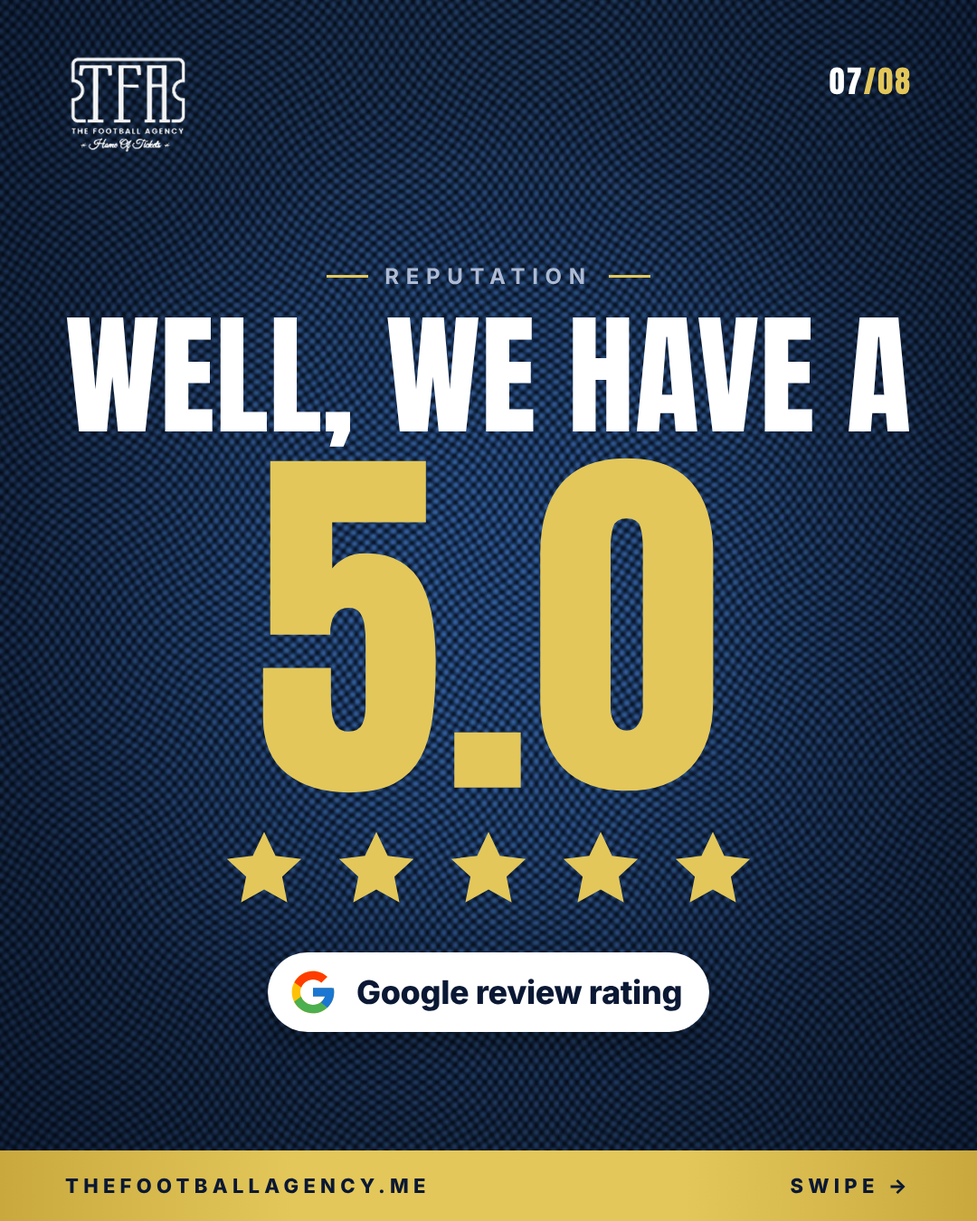
<style>
.page{position:relative;width:977px;height:1221px}
.page>*{position:absolute;margin:0}
.t1{font:30.7px "Anton-Regular";letter-spacing:0.06em;color:#e3c75a}
.t2{font:30.7px "Anton-Regular";letter-spacing:0.06em;color:#ffffff}
.t3{font:21.7px "Inter-Bold";letter-spacing:0.32em;color:#aebbd3}
.t4{font:132.6px "Anton-Regular";letter-spacing:0.005em;color:#ffffff}
.t5{font:379.8px "Anton-Regular";letter-spacing:0.005em;color:#e3c75a}
.t6{font:32.6px "Inter-ExtraBold";letter-spacing:-0.01em;color:#0a1834}
.t7{font:19.9px "Inter-ExtraBold";letter-spacing:0.24em;color:#0a1834}
</style>
<div class="page">
<p class="t1" style="left:829px;top:67px;width:81px;height:28px"><span class="t2">07</span>/08</p>
<p class="t3" style="left:385px;top:268px;width:199px;height:17px">REPUTATION</p>
<p class="t4" style="left:66px;top:317px;width:843px;height:130px">WELL, WE HAVE A</p>
<p class="t5" style="left:262px;top:458px;width:452px;height:335px">5.0</p>
<p class="t6" style="left:357px;top:979px;width:324px;height:32px">Google review rating</p>
<p class="t7" style="left:65px;top:1177px;width:360px;height:17px">THEFOOTBALLAGENCY.ME</p>
<p class="t7" style="left:790px;top:1177px;width:115px;height:17px">SWIPE →</p>
</div>
